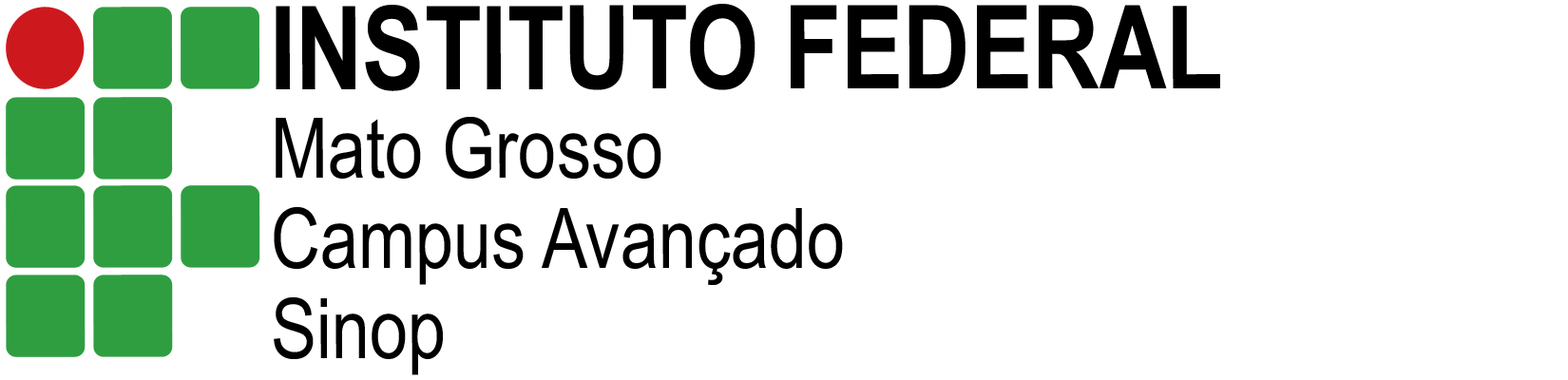
<style>
.page{position:relative;width:1568px;height:380px;background:#ffffff}
.page>*{position:absolute;margin:0}
.t1{font:115.9px "ArialNarrow-Bold";color:#000000}
.t2{font:83.6px "ArialNarrow";color:#000000}
</style>
<div class="page">
<p class="t1" style="left:276px;top:4px;width:944px;height:87px">INSTITUTO FEDERAL</p>
<p class="t2" style="left:276px;top:117px;width:385px;height:62px">Mato Grosso</p>
<p class="t2" style="left:274px;top:207px;width:569px;height:78px">Campus Avançado</p>
<p class="t2" style="left:274px;top:297px;width:169px;height:78px">Sinop</p>
</div>
